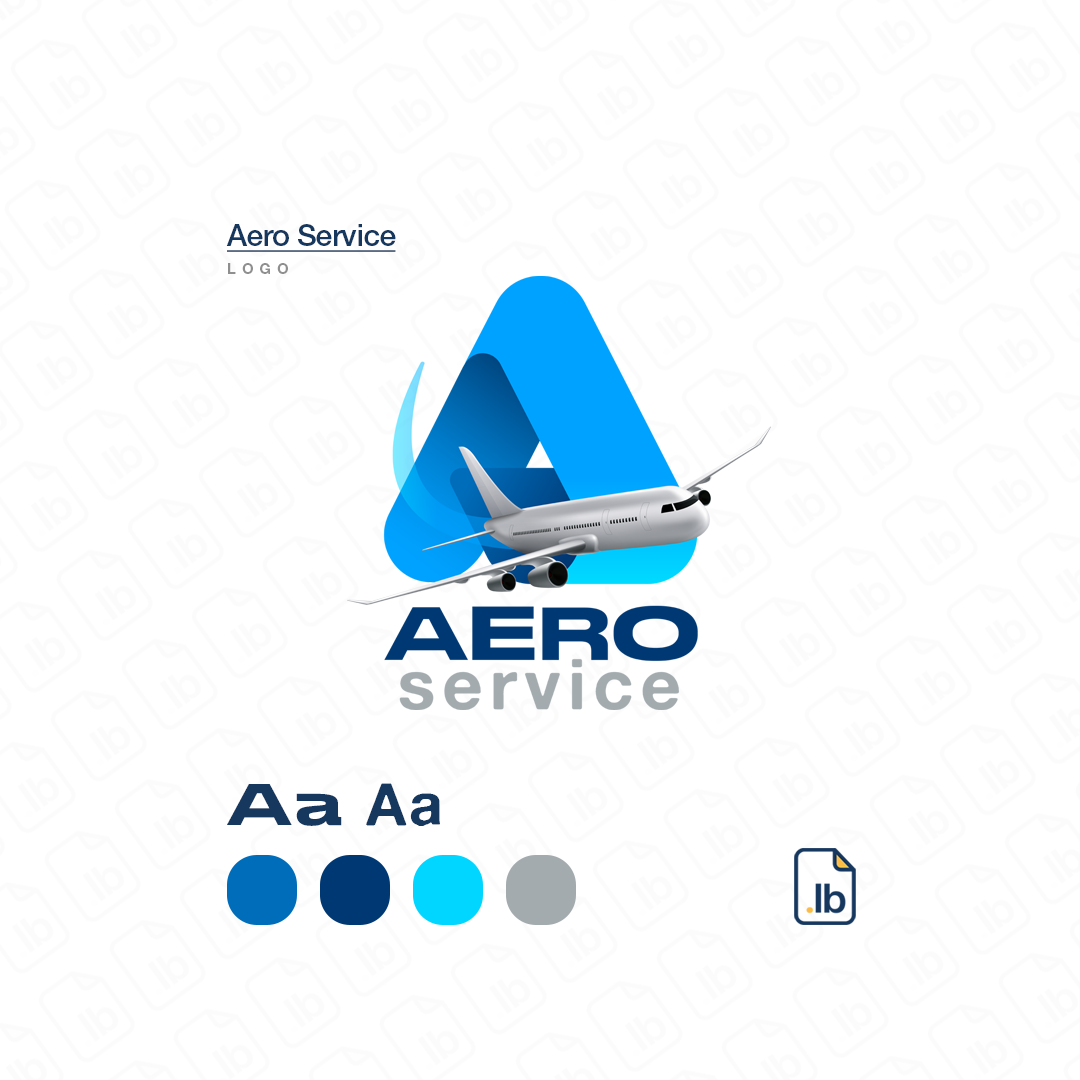
<style>
.page{position:relative;width:1080px;height:1080px;background:#ffffff}
.page>*{position:absolute;margin:0}
.t1{font:30px/27.5px "HelveticaNeueLTPro-Md";letter-spacing:-0.02em;color:#16375e;text-decoration:underline}
.t2{font:15px/27.5px "HelveticaNeueLTPro-Bd";letter-spacing:0.4em;color:#8f8f8f}
.t3{font:59px "StretchProRegular";letter-spacing:0.05em;color:#16375e}
.t4{font:59px "AlteHaasGrotesk_Bold";letter-spacing:0.05em;color:#16375e}
</style>
<div class="page">
<p class="t1" style="left:226px;top:224px;width:170px;height:50px">Aero Service<br><span class="t2">LOGO</span></p>
<p class="t3" style="left:227px;top:784px;width:115px;height:42px">Aa</p>
<p class="t4" style="left:366px;top:783px;width:74px;height:43px">Aa</p>
</div>
